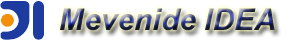
<style>
.page{position:relative;width:300px;height:40px;background:#ffffff}
.page>*{position:absolute;margin:0}
.t1{font:30px "Arial-BoldItalicMT"}
</style>
<div class="page">
<p class="t1" style="left:60px;top:8px;width:215px;height:23px">Mevenide IDEA</p>
</div>
